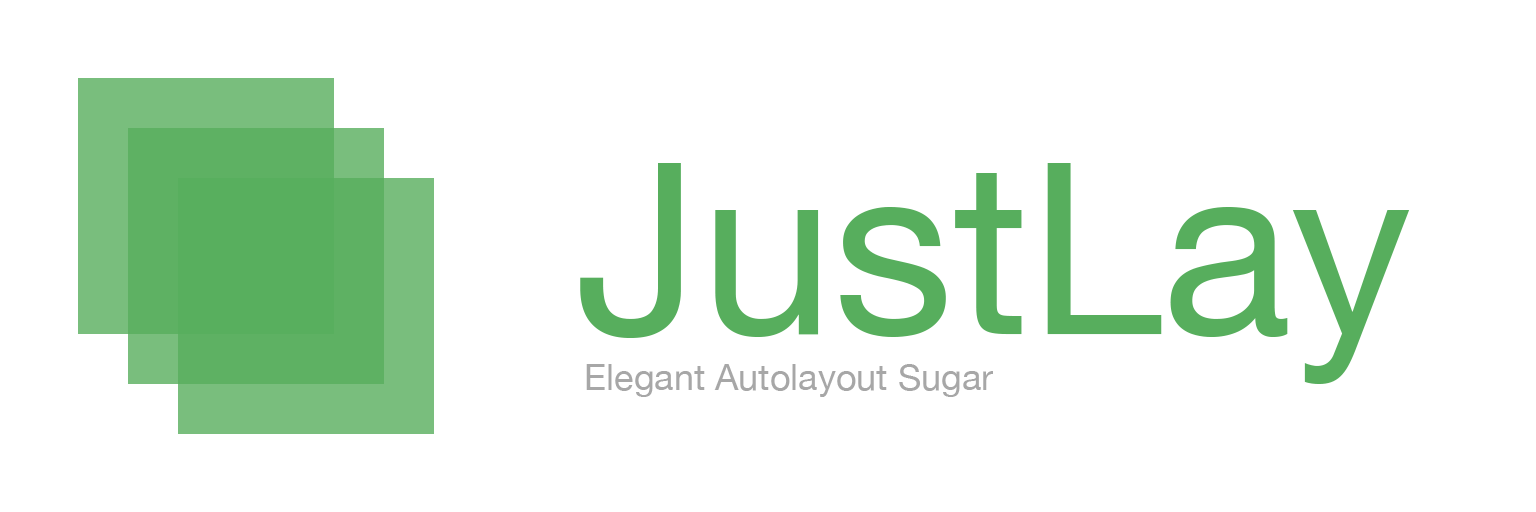
<style>
.page{position:relative;width:1536px;height:512px;background:#ffffff}
.page>*{position:absolute;margin:0}
.t1{font:240px "HelveticaNeue";color:#57ae5d}
.t2{font:36px "HelveticaNeue";color:#a7a7a7}
</style>
<div class="page">
<p class="t1" style="left:580px;top:163px;width:830px;height:221px">JustLayout</p>
<p class="t2" style="left:586px;top:364px;width:407px;height:33px">Elegant Autolayout Sugar</p>
</div>
